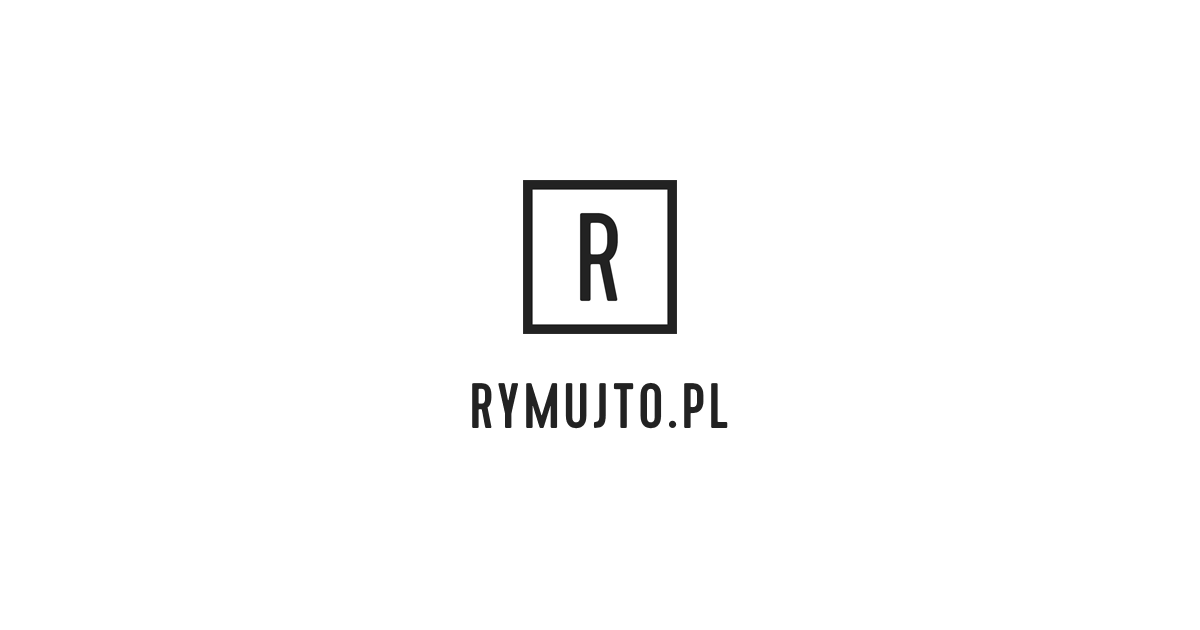
<style>
.page{position:relative;width:1200px;height:630px;background:#ffffff}
.page>*{position:absolute;margin:0}
.t1{font:64.1px "Cervo-Medium";letter-spacing:0.06em;color:#222222}
</style>
<div class="page">
<p class="t1" style="left:472px;top:382px;width:256px;height:47px">RYMUJTO.PL</p>
</div>
